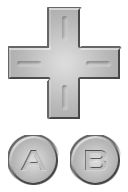
<style>
.page{position:relative;width:128px;height:192px;background:#ffffff}
.page>*{position:absolute;margin:0}
.t1{font:30px "HanzelWideNormal";color:#c1c1c1}
.t2{font:30px "HanzelWideNormal";color:#bebebe}
</style>
<div class="page">
<p class="t1" style="left:20px;top:150px;width:28px;height:21px">A</p>
<p class="t2" style="left:85px;top:150px;width:23px;height:21px">B</p>
</div>
